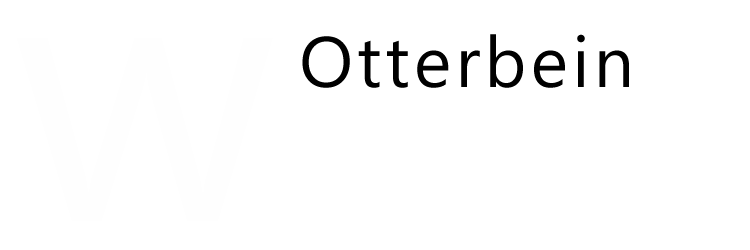
<style>
.page{position:relative;width:750px;height:250px;background:#ffffff}
.page>*{position:absolute;margin:0}
.t1{font:71.2px "LeelawadeeUI";letter-spacing:0.06em;color:#000000}
</style>
<div class="page">
<p class="t1" style="left:302px;top:34px;width:327px;height:54px">Otterbein</p>
</div>
